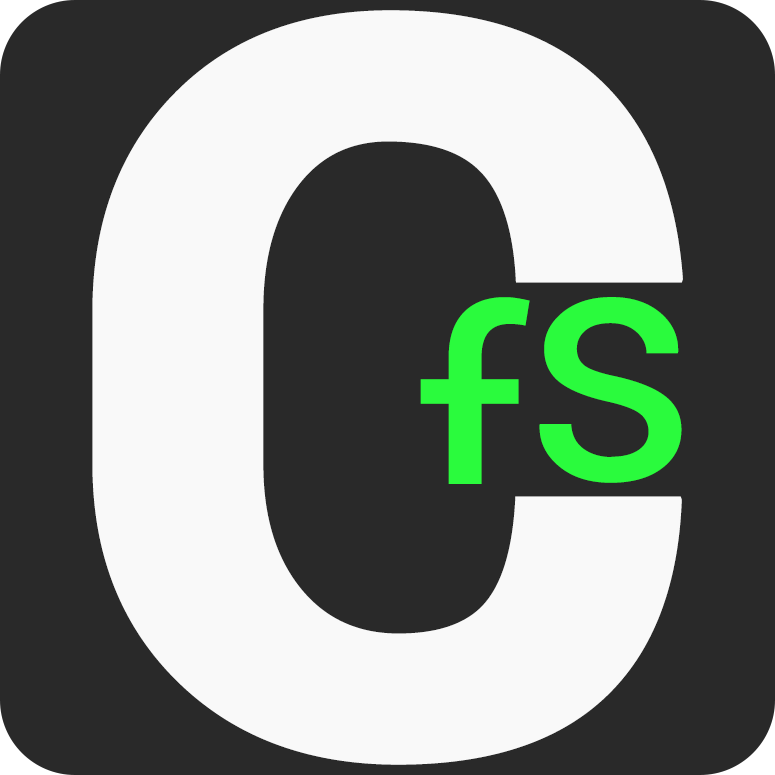
<style>
.page{position:relative;width:775px;height:775px;background:#292929}
.page>*{position:absolute;margin:0}
.t1{font:1145.8px "Yantramanav-Black";color:#f9f9f9}
.t2{font:375px "Yantramanav-Regular";color:#2afb3d}
</style>
<div class="page">
<p class="t1" style="left:92px;top:10px;width:591px;height:755px">C</p>
<p class="t2" style="left:420px;top:297px;width:110px;height:261px">f</p>
<p class="t2" style="left:539px;top:297px;width:143px;height:186px">s</p>
</div>
